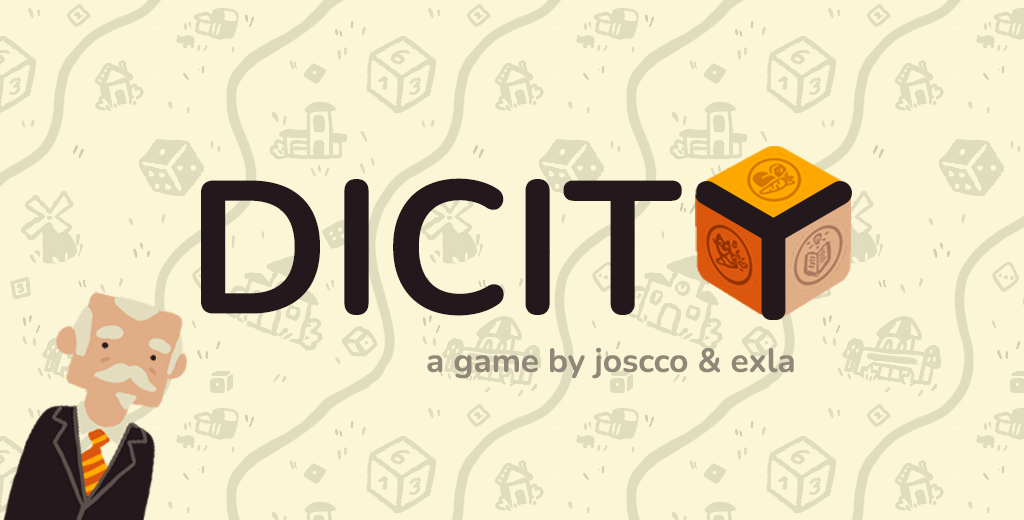
<style>
.page{position:relative;width:1024px;height:520px;background:#fbf6d5}
.page>*{position:absolute;margin:0}
.t1{font:188.5px "Nunito-Bold";color:#23181c;font-weight:bold}
.t2{font:33.3px "Nunito-Bold";color:#8f8778;font-weight:bold}
</style>
<div class="page">
<p class="t1" style="left:201px;top:178px;width:481px;height:138px">DICIT</p>
<p class="t2" style="left:427px;top:347px;width:367px;height:32px">a game by joscco &amp; exla</p>
</div>
